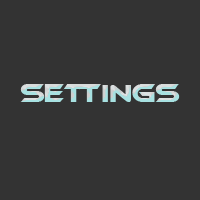
<style>
.page{position:relative;width:200px;height:200px;background:#333333}
.page>*{position:absolute;margin:0}
.t1{font:24px "Ethnocentric"}
</style>
<div class="page">
<p class="t1" style="left:20px;top:84px;width:160px;height:18px">Settings</p>
</div>
